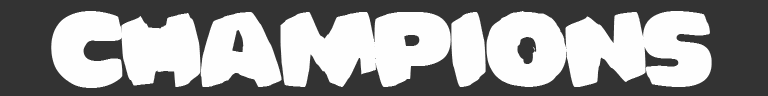
<style>
.page{position:relative;width:768px;height:96px;background:#333333}
.page>*{position:absolute;margin:0}
.t1{font:100px "Bomberman";color:#fefefe}
</style>
<div class="page">
<p class="t1" style="left:51px;top:11px;width:661px;height:77px">Champions</p>
</div>
